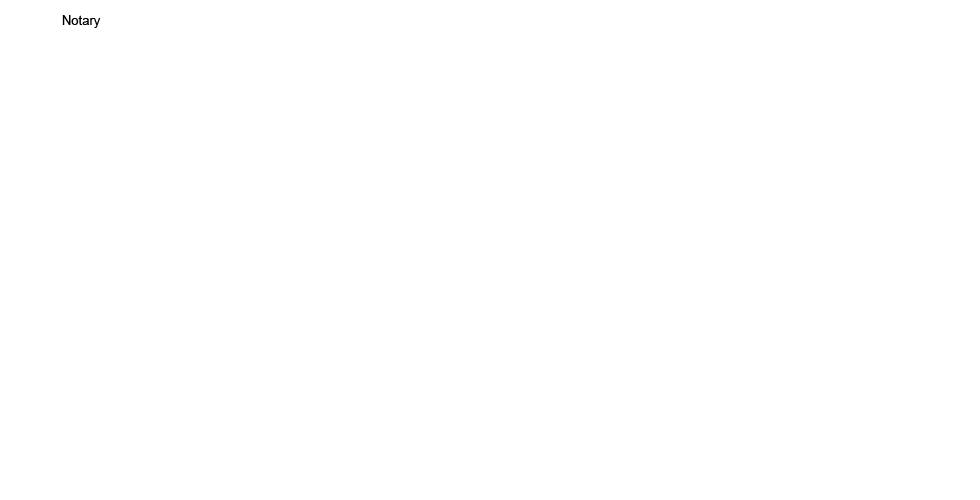
<style>
.page{position:relative;width:980px;height:500px;background:#ffffff}
.page>*{position:absolute;margin:0}
.t1{font:13px "ArialMT";color:#000000}
</style>
<div class="page">
<p class="t1" style="left:62px;top:15px;width:39px;height:13px">Notary</p>
</div>
